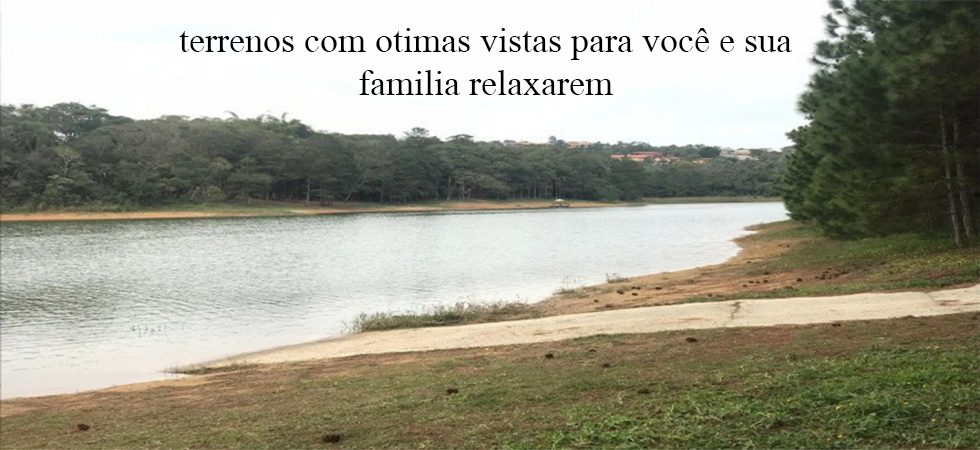
<style>
.page{position:relative;width:980px;height:450px}
.page>*{position:absolute;margin:0}
.t1{font:36px "MongolianBaiti";color:#000000}
</style>
<div class="page">
<p class="t1" style="left:179px;top:28px;width:613px;height:67px;text-align:center">terrenos com otimas vistas para você e sua familia relaxarem</p>
</div>
